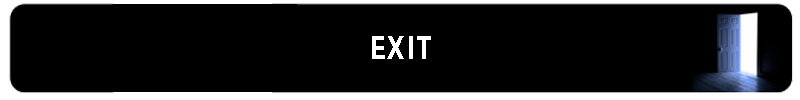
<style>
.page{position:relative;width:800px;height:100px;background:#000000}
.page>*{position:absolute;margin:0}
.t1{font:34.1px "Srinakharinwirot-Regular";letter-spacing:0.02em;color:#ffffff}
</style>
<div class="page">
<p class="t1" style="left:372px;top:36px;width:59px;height:23px">EXIT</p>
</div>
